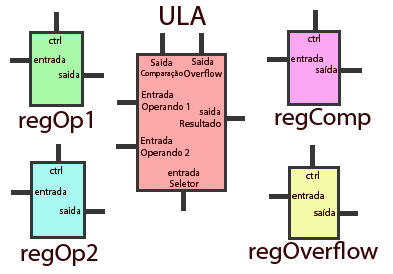
<style>
.page{position:relative;width:393px;height:274px;background:#ffffff}
.page>*{position:absolute;margin:0}
.t1{font:28px "MyriadHebrew-Regular";color:#370707}
.t2{font:8px "MyriadHebrew-Regular";color:#370707}
.t3{font:10px "MyriadHebrew-Regular";color:#370707}
.t4{font:25px "MyriadHebrew-Regular";color:#370707}
</style>
<div class="page">
<p class="t1" style="left:160px;top:6px;width:46px;height:19px">ULA</p>
<p class="t2" style="left:140px;top:58px;width:43px;height:20px;text-align:center"><span class="t3">Saida<br></span>Comparação</p>
<p class="t3" style="left:184px;top:57px;width:38px;height:20px;text-align:center">Saida<br>Overflow</p>
<p class="t3" style="left:141px;top:90px;width:49px;height:22px;text-align:right">Entrada<br>Operando 1</p>
<p class="t4" style="left:19px;top:111px;width:73px;height:22px">regOp1</p>
<p class="t3" style="left:180px;top:107px;width:41px;height:20px">saida<br>Resultado</p>
<p class="t4" style="left:275px;top:108px;width:96px;height:22px">regComp</p>
<p class="t3" style="left:140px;top:136px;width:50px;height:22px;text-align:right">Entrada<br>Operando 2</p>
<p class="t3" style="left:168px;top:168px;width:32px;height:19px;text-align:center">entrada<br>Seletor</p>
<p class="t3" style="left:306px;top:171px;width:13px;height:8px">ctrl</p>
<p class="t3" style="left:292px;top:191px;width:32px;height:8px">entrada</p>
<p class="t3" style="left:314px;top:208px;width:21px;height:8px">saída</p>
<p class="t4" style="left:21px;top:244px;width:77px;height:22px">regOp2</p>
<p class="t4" style="left:249px;top:241px;width:129px;height:23px">regOverflow</p>
</div>
